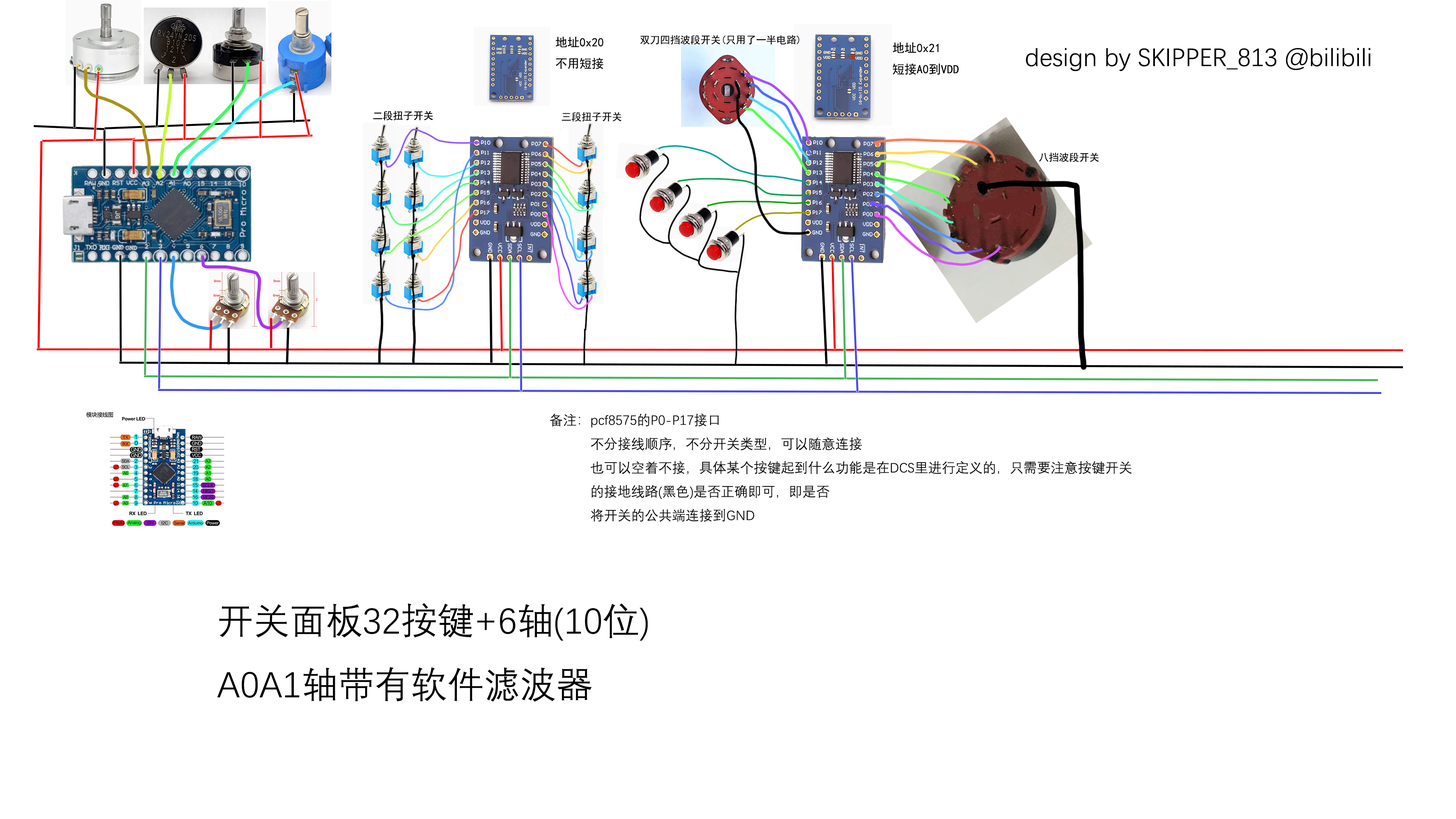
<style>
.page{position:relative;width:1456px;height:819px;background:#ffffff}
.page>*{position:absolute;margin:0}
.t1{font:4.5px "SimHei";color:#000000}
.t2{font:10.1px "SimHei";color:#000000}
.t3{font:12.1px "SimHei";color:#000000}
.t4{font:25.5px "DengXian";color:#000000}
.t5{font:13.6px "DengXian";color:#000000}
.t6{font:36.4px "DengXian";color:#000000}
</style>
<div class="page">
<p class="t1" style="left:555px;top:36px;width:49px;height:33px">地址0x20<br>不用短接</p>
<p class="t2" style="left:640px;top:35px;width:159px;height:10px">双刀四挡波段开关(只用了一半电路)</p>
<p class="t3" style="left:893px;top:42px;width:66px;height:33px">地址0x21<br>短接A0到VDD</p>
<p class="t4" style="left:1026px;top:48px;width:344px;height:23px">design by SKIPPER_813 @bilibili</p>
<p class="t2" style="left:562px;top:112px;width:59px;height:10px">三段扭子开关</p>
<p class="t2" style="left:1039px;top:152px;width:60px;height:10px">八挡波段开关</p>
<p class="t5" style="left:550px;top:413px;width:582px;height:109px">备注：pcf8575的P0-P17接口<br>        不分接线顺序，不分开关类型，可以随意连接<br>        也可以空着不接，具体某个按键起到什么功能是在DCS里进行定义的，只需要注意按键开关<br>        的接地线路(黑色)是否正确即可，即是否<br>        将开关的公共端连接到GND</p>
<p class="t6" style="left:217px;top:603px;width:431px;height:99px">开关面板32按键+6轴(10位)<br>A0A1轴带有软件滤波器</p>
</div>
